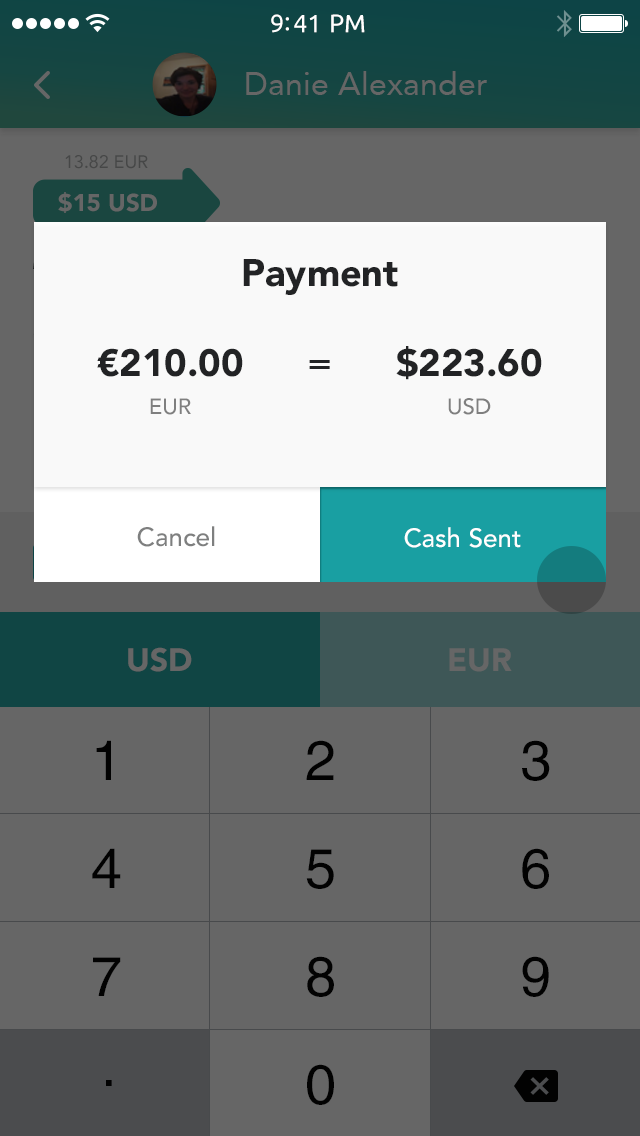
<style>
.page{position:relative;width:640px;height:1136px;background:#666666}
.page>*{position:absolute;margin:0}
.t1{font:25px "Ubuntu";color:#ffffff}
.t2{font:32px "Avenir-Roman";color:#666666}
.t3{font:38px "Avenir-Black";color:#222325}
.t4{font:22px/38px "Avenir-Medium";color:#7f7f7f}
.t5{font:38px "Avenir-Medium";color:#222325}
.t6{font:26px "Avenir-Medium";color:#7e7f7f}
.t7{font:26px "Avenir-Medium";color:#ffffff}
</style>
<div class="page">
<p class="t1" style="left:271px;top:14px;width:94px;height:19px">9:41 PM</p>
<p class="t2" style="left:246px;top:71px;width:241px;height:24px">Danie Alexander</p>
<p class="t3" style="left:243px;top:259px;width:155px;height:36px">Payment</p>
<p class="t3" style="left:97px;top:348px;width:146px;height:67px;text-align:center">€210.00<br><span class="t4">EUR</span></p>
<p class="t3" style="left:396px;top:346px;width:146px;height:69px;text-align:center">$223.60<br><span class="t4">USD</span></p>
<p class="t5" style="left:309px;top:360px;width:21px;height:9px">=</p>
<p class="t6" style="left:137px;top:526px;width:78px;height:21px">Cancel</p>
<p class="t7" style="left:404px;top:526px;width:117px;height:21px">Cash Sent</p>
<p class="t7" style="left:404px;top:527px;width:117px;height:21px">Cash Sent</p>
</div>
